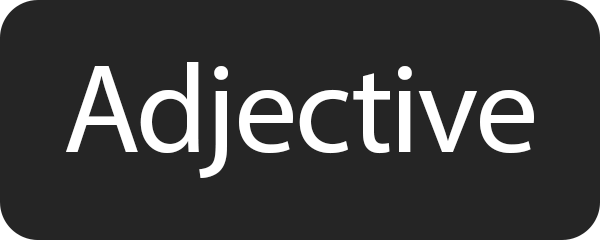
<style>
.page{position:relative;width:600px;height:240px;background:#252525}
.page>*{position:absolute;margin:0}
.t1{font:127px "MyriadPro-Regular";letter-spacing:-0.02em;color:#ffffff}
</style>
<div class="page">
<p class="t1" style="left:66px;top:62px;width:468px;height:116px">Adjective</p>
</div>
